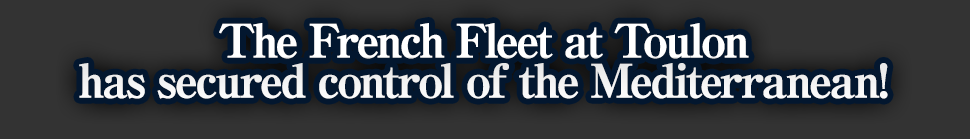
<style>
.page{position:relative;width:970px;height:139px;background:#333333}
.page>*{position:absolute;margin:0}
.t1{font:46px/40px "RyuminPro-ExBold";letter-spacing:-0.08em;color:#ffffff;font-weight:bold}
</style>
<div class="page">
<p class="t1" style="left:79px;top:23px;width:809px;height:76px;text-align:center">The French Fleet at Toulon<br>has secured control of the Mediterranean!</p>
</div>
